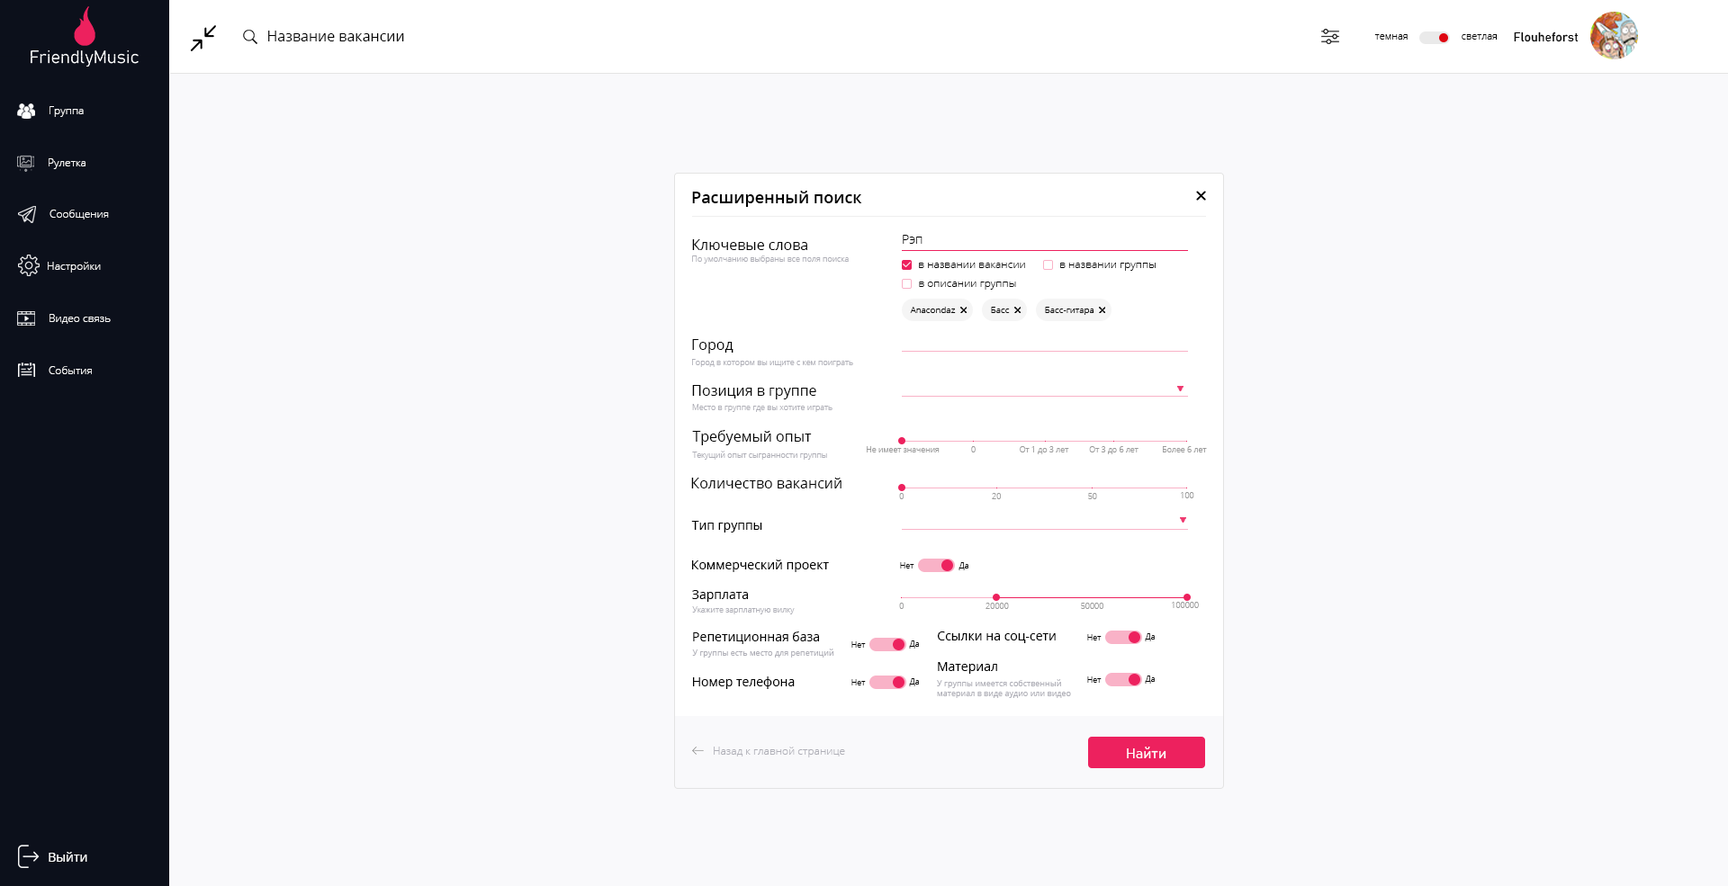
<style>
.page{position:relative;width:1728px;height:886px;background:#f9f9fb}
.page>*{position:absolute;margin:0}
.t1{font:14.4px "OpenSans";color:#000000}
.t2{font:9.9px "OpenSans-Light";color:#000000}
.t3{font:12.6px "Bahnschrift";color:#000000}
.t4{font:10.8px "OpenSans-Light";color:#ffffff}
.t5{font:16.2px "OpenSans-Semibold";color:#000000}
.t6{font:12.6px "OpenSans-Light";color:#000000}
.t7{font:8.1px "OpenSans-Light";color:#afafb7}
.t8{font:10.8px "OpenSans-Light";color:#000000}
.t9{font:9px "OpenSans-Light";color:#000000}
.t10{font:8.1px "OpenSans-Light";color:#9a9a9a}
.t11{font:12.6px "OpenSans";color:#000000}
.t12{font:8.1px "OpenSans-Light";color:#000000}
.t13{font:8.1px "OpenSans";color:#afafb7}
.t14{font:10.8px "OpenSans-Light";color:#afafb7}
.t15{font:14.4px "Bahnschrift-SemiLight";color:#ffffff}
.t16{font:12.6px "OpenSans";color:#ffffff}
</style>
<div class="page">
<p class="t1" style="left:268px;top:31px;width:136px;height:10px">Название вакансии</p>
<p class="t2" style="left:1374px;top:34px;width:34px;height:6px">темная</p>
<p class="t2" style="left:1462px;top:34px;width:35px;height:6px">светлая</p>
<p class="t3" style="left:1514px;top:32px;width:65px;height:10px">Flouheforst</p>
<p class="t4" style="left:50px;top:106px;width:34px;height:11px">Группа</p>
<p class="t4" style="left:49px;top:158px;width:37px;height:11px">Рулетка</p>
<p class="t5" style="left:692px;top:191px;width:170px;height:16px">Расширенный поиск</p>
<p class="t4" style="left:50px;top:210px;width:59px;height:10px">Сообщения</p>
<p class="t1" style="left:692px;top:239px;width:115px;height:11px">Ключевые слова</p>
<p class="t6" style="left:903px;top:235px;width:19px;height:9px">Рэп</p>
<p class="t7" style="left:692px;top:256px;width:157px;height:8px">По умолчанию выбраны все поля поиска</p>
<p class="t4" style="left:48px;top:262px;width:53px;height:11px">Настройки</p>
<p class="t8" style="left:919px;top:263px;width:106px;height:5px">в названии вакансии</p>
<p class="t8" style="left:1060px;top:263px;width:96px;height:8px">в названии группы</p>
<p class="t8" style="left:919px;top:282px;width:97px;height:8px">в описании группы</p>
<p class="t4" style="left:50px;top:314px;width:61px;height:10px">Видео связь</p>
<p class="t9" style="left:910px;top:307px;width:46px;height:6px">Anacondaz</p>
<p class="t9" style="left:991px;top:307px;width:19px;height:6px">Басс</p>
<p class="t9" style="left:1045px;top:307px;width:49px;height:8px">Басс-гитара</p>
<p class="t1" style="left:692px;top:339px;width:42px;height:15px">Город</p>
<p class="t7" style="left:692px;top:359px;width:161px;height:8px">Город в котором вы ищите с кем поиграть</p>
<p class="t4" style="left:49px;top:366px;width:43px;height:8px">События</p>
<p class="t1" style="left:692px;top:385px;width:124px;height:15px">Позиция в группе</p>
<p class="t7" style="left:692px;top:404px;width:140px;height:8px">Место в группе где вы хотите играть</p>
<p class="t1" style="left:692px;top:430px;width:120px;height:16px">Требуемый опыт</p>
<p class="t10" style="left:867px;top:446px;width:73px;height:7px">Не имеет значения</p>
<p class="t10" style="left:971px;top:446px;width:5px;height:7px">0</p>
<p class="t10" style="left:1020px;top:446px;width:49px;height:8px">От 1 до 3 лет</p>
<p class="t10" style="left:1089px;top:446px;width:49px;height:8px">От 3 до 6 лет</p>
<p class="t10" style="left:1163px;top:446px;width:44px;height:7px">Более 6 лет</p>
<p class="t7" style="left:692px;top:451px;width:135px;height:9px">Текущий опыт сыгранности группы</p>
<p class="t1" style="left:691px;top:478px;width:151px;height:11px">Количество вакансий</p>
<p class="t10" style="left:899px;top:493px;width:5px;height:7px">0</p>
<p class="t10" style="left:992px;top:493px;width:9px;height:7px">20</p>
<p class="t10" style="left:1088px;top:493px;width:9px;height:7px">50</p>
<p class="t10" style="left:1181px;top:492px;width:13px;height:7px">100</p>
<p class="t11" style="left:691px;top:521px;width:71px;height:12px">Тип группы</p>
<p class="t11" style="left:692px;top:560px;width:137px;height:12px">Коммерческий проект</p>
<p class="t12" style="left:900px;top:562px;width:14px;height:7px">Нет</p>
<p class="t12" style="left:958px;top:562px;width:10px;height:9px">Да</p>
<p class="t11" style="left:692px;top:590px;width:56px;height:12px">Зарплата</p>
<p class="t10" style="left:899px;top:603px;width:5px;height:6px">0</p>
<p class="t10" style="left:986px;top:603px;width:23px;height:6px">20000</p>
<p class="t10" style="left:1081px;top:603px;width:22px;height:6px">50000</p>
<p class="t10" style="left:1172px;top:602px;width:27px;height:6px">100000</p>
<p class="t7" style="left:692px;top:607px;width:103px;height:8px">Укажите зарплатную вилку</p>
<p class="t11" style="left:693px;top:632px;width:126px;height:12px">Репетиционная база</p>
<p class="t12" style="left:851px;top:642px;width:15px;height:6px">Нет</p>
<p class="t12" style="left:909px;top:641px;width:10px;height:8px">Да</p>
<p class="t11" style="left:938px;top:632px;width:118px;height:12px">Ссылки на соц-сети</p>
<p class="t12" style="left:1087px;top:634px;width:15px;height:7px">Нет</p>
<p class="t12" style="left:1145px;top:634px;width:10px;height:8px">Да</p>
<p class="t13" style="left:692px;top:649px;width:142px;height:9px">У группы есть место для репетиций</p>
<p class="t11" style="left:938px;top:662px;width:59px;height:12px">Материал</p>
<p class="t11" style="left:693px;top:677px;width:102px;height:12px">Номер телефона</p>
<p class="t12" style="left:1087px;top:677px;width:15px;height:6px">Нет</p>
<p class="t12" style="left:1145px;top:676px;width:10px;height:8px">Да</p>
<p class="t12" style="left:851px;top:680px;width:15px;height:6px">Нет</p>
<p class="t12" style="left:909px;top:679px;width:10px;height:8px">Да</p>
<p class="t13" style="left:937px;top:680px;width:134px;height:18px">У группы имеется собственный<br>материал в виде аудио или видео</p>
<p class="t14" style="left:714px;top:747px;width:131px;height:11px">Назад к главной странице</p>
<p class="t15" style="left:1127px;top:747px;width:39px;height:13px">Найти</p>
<p class="t16" style="left:49px;top:852px;width:38px;height:10px">Выйти</p>
</div>
